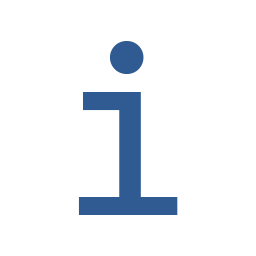
<style>
.page{position:relative;width:256px;height:256px;background:#ffffff}
.page>*{position:absolute;margin:0}
.t1{font:250px "Consolas";color:#2f5b92}
</style>
<div class="page">
<p class="t1" style="left:78px;top:41px;width:100px;height:174px">i</p>
</div>
